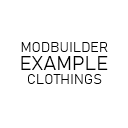
<style>
.page{position:relative;width:128px;height:128px;background:#ffffff}
.page>*{position:absolute;margin:0}
.t1{font:14.1px "Bahnschrift-SemiCondensed";color:#000000}
.t2{font:19.9px "Bahnschrift-SemiCondensed";color:#000000}
</style>
<div class="page">
<p class="t1" style="left:21px;top:42px;width:87px;height:10px">MODBUILDER</p>
<p class="t2" style="left:21px;top:56px;width:87px;height:14px">EXAMPLE</p>
<p class="t1" style="left:28px;top:74px;width:74px;height:10px">CLOTHINGS</p>
</div>
